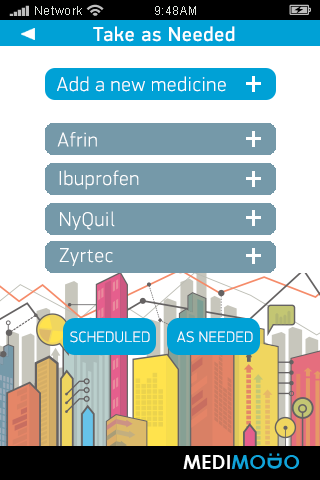
<style>
.page{position:relative;width:320px;height:480px;background:#ffffff}
.page>*{position:absolute;margin:0}
.t1{font:12px "ArialMT";letter-spacing:0.05em;color:#dfe4de}
.t2{font:20px "PFDinDisplayPro-Regular";letter-spacing:0.05em;color:#ffffff}
.t3{font:20px "PFDinDisplayPro-Thin";letter-spacing:0.05em;color:#ffffff}
.t4{font:15px "PFDinDisplayPro-Thin";letter-spacing:0.05em;color:#ffffff}
</style>
<div class="page">
<p class="t1" style="left:35px;top:6px;width:47px;height:9px">Network</p>
<p class="t1" style="left:155px;top:6px;width:41px;height:9px">9:48AM</p>
<p class="t2" style="left:93px;top:26px;width:142px;height:16px">Take as Needed</p>
<p class="t3" style="left:57px;top:76px;width:169px;height:16px">Add a new medicine</p>
<p class="t3" style="left:57px;top:132px;width:40px;height:15px">Afrin</p>
<p class="t3" style="left:59px;top:170px;width:80px;height:20px">Ibuprofen</p>
<p class="t3" style="left:60px;top:211px;width:55px;height:19px">NyQuil</p>
<p class="t3" style="left:59px;top:248px;width:54px;height:18px">Zyrtec</p>
<p class="t4" style="left:70px;top:331px;width:80px;height:12px">SCHEDULED</p>
<p class="t4" style="left:177px;top:331px;width:76px;height:12px">AS NEEDED</p>
</div>
